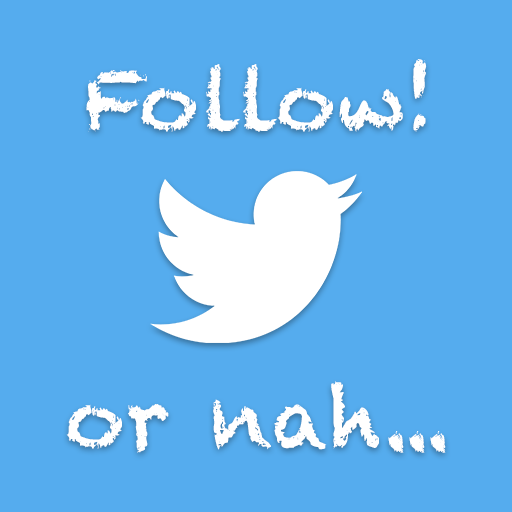
<style>
.page{position:relative;width:512px;height:512px;background:#55acee}
.page>*{position:absolute;margin:0}
.t1{font:83.3px "Chalkduster";color:#ffffff}
</style>
<div class="page">
<p class="t1" style="left:86px;top:59px;width:341px;height:73px">Follow!</p>
<p class="t1" style="left:66px;top:381px;width:380px;height:72px">or nah...</p>
</div>
